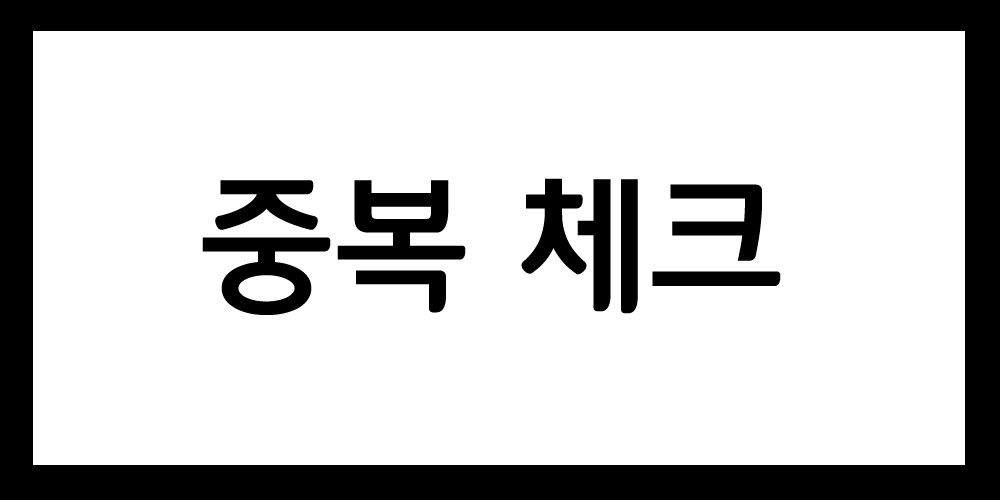
<style>
.page{position:relative;width:1000px;height:500px;background:#ffffff}
.page>*{position:absolute;margin:0}
.t1{font:150px "12LotteMartDreamBold";color:#000000}
</style>
<div class="page">
<p class="t1" style="left:202px;top:178px;width:579px;height:137px">중복 체크</p>
</div>
